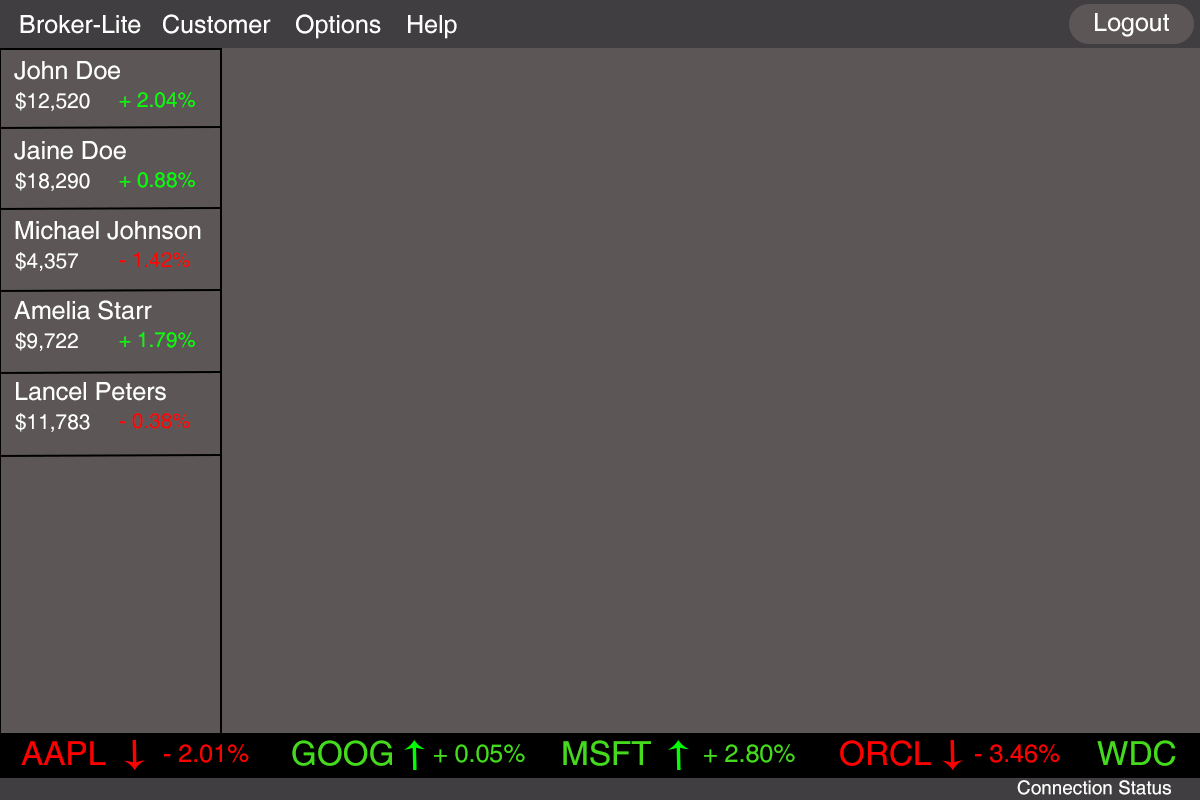
<style>
.page{position:relative;width:1200px;height:800px;background:#5c5656}
.page>*{position:absolute;margin:0}
.t1{font:25px "Helvetica";color:#ffffff}
.t2{font:20.8px "Helvetica";color:#ffffff}
.t3{font:20.8px "Helvetica";color:#00ff00}
.t4{font:20.8px "Helvetica";color:#ff0000}
.t5{font:33.3px "Helvetica";color:#ff0000}
.t6{font:25px "Helvetica";color:#ff0000}
.t7{font:33.3px "Helvetica";color:#46da1f}
.t8{font:25px "Helvetica";color:#46da1f}
.t9{font:18.9px "Helvetica";color:#ffffff}
</style>
<div class="page">
<p class="t1" style="left:20px;top:15px;width:121px;height:19px">Broker-Lite</p>
<p class="t1" style="left:163px;top:14px;width:108px;height:20px">Customer</p>
<p class="t1" style="left:296px;top:14px;width:85px;height:25px">Options</p>
<p class="t1" style="left:408px;top:15px;width:49px;height:24px">Help</p>
<p class="t1" style="left:1095px;top:13px;width:74px;height:24px">Logout</p>
<p class="t1" style="left:14px;top:61px;width:106px;height:19px">John Doe</p>
<p class="t2" style="left:15px;top:92px;width:75px;height:19px">$12,520</p>
<p class="t3" style="left:119px;top:92px;width:76px;height:16px">+ 2.04%</p>
<p class="t1" style="left:14px;top:141px;width:112px;height:19px">Jaine Doe</p>
<p class="t2" style="left:15px;top:172px;width:75px;height:19px">$18,290</p>
<p class="t3" style="left:119px;top:172px;width:76px;height:16px">+ 0.88%</p>
<p class="t1" style="left:15px;top:221px;width:186px;height:19px">Michael Johnson</p>
<p class="t2" style="left:15px;top:252px;width:63px;height:19px">$4,357</p>
<p class="t4" style="left:120px;top:252px;width:70px;height:16px">- 1.42%</p>
<p class="t1" style="left:14px;top:300px;width:138px;height:20px">Amelia Starr</p>
<p class="t2" style="left:15px;top:332px;width:63px;height:19px">$9,722</p>
<p class="t3" style="left:119px;top:332px;width:76px;height:16px">+ 1.79%</p>
<p class="t1" style="left:16px;top:382px;width:150px;height:19px">Lancel Peters</p>
<p class="t2" style="left:15px;top:413px;width:75px;height:19px">$11,783</p>
<p class="t4" style="left:120px;top:413px;width:70px;height:16px">- 0.38%</p>
<p class="t5" style="left:21px;top:741px;width:85px;height:24px">AAPL</p>
<p class="t6" style="left:164px;top:744px;width:85px;height:19px">- 2.01%</p>
<p class="t7" style="left:292px;top:740px;width:100px;height:26px">GOOG</p>
<p class="t8" style="left:434px;top:744px;width:91px;height:19px">+ 0.05%</p>
<p class="t7" style="left:563px;top:740px;width:88px;height:26px">MSFT</p>
<p class="t8" style="left:704px;top:744px;width:91px;height:19px">+ 2.80%</p>
<p class="t5" style="left:840px;top:740px;width:91px;height:26px">ORCL</p>
<p class="t6" style="left:975px;top:744px;width:85px;height:19px">- 3.46%</p>
<p class="t7" style="left:1097px;top:740px;width:79px;height:26px">WDC</p>
<p class="t9" style="left:1017px;top:780px;width:154px;height:15px">Connection Status</p>
</div>
